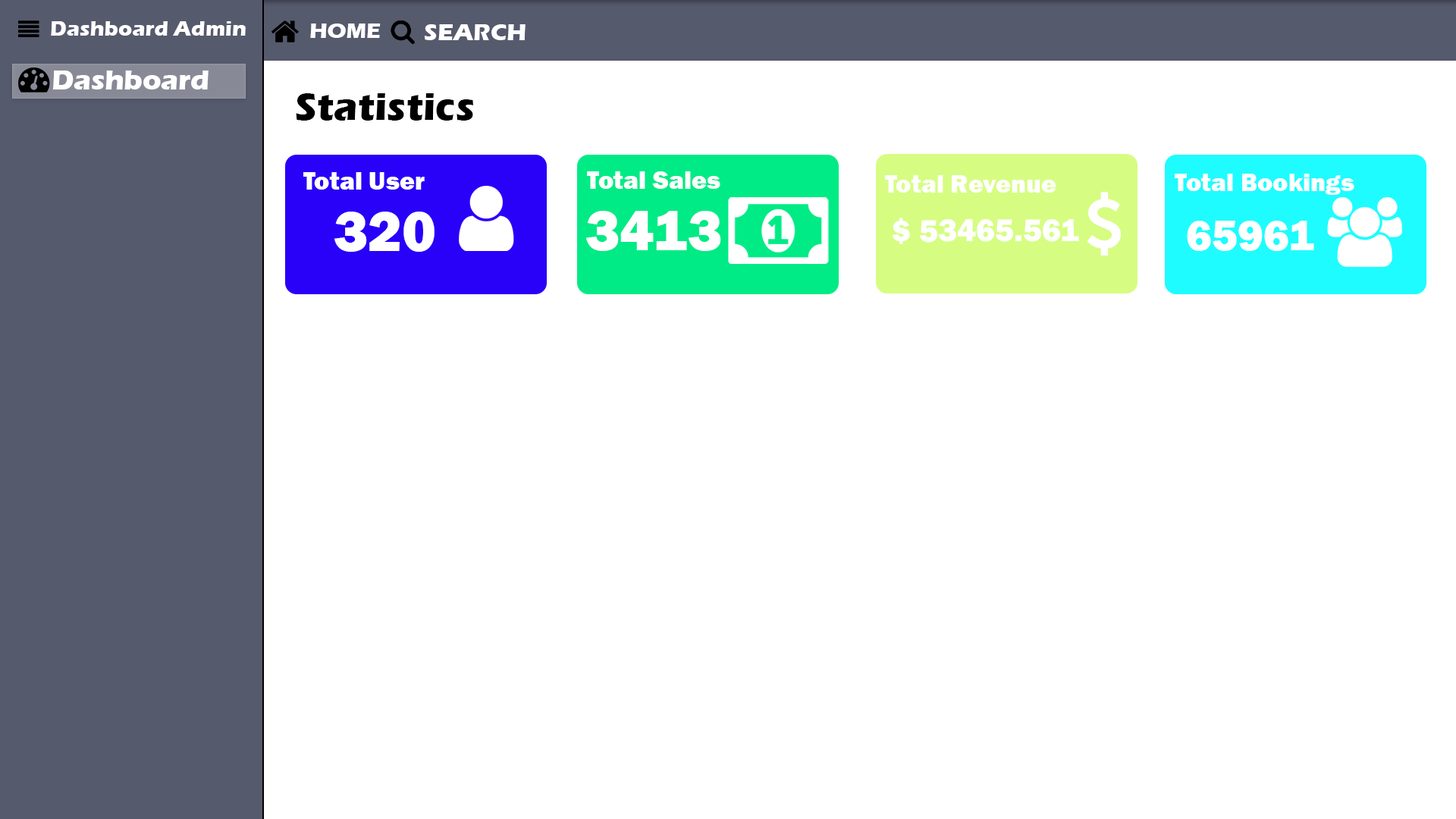
<style>
.page{position:relative;width:1456px;height:819px;background:#ffffff}
.page>*{position:absolute;margin:0}
.t1{font:21.4px "ErasITC-Bold";color:#ffffff}
.t2{font:21.9px "ErasITC-Bold";color:#ffffff}
.t3{font:24.4px "ErasITC-Bold";color:#ffffff}
.t4{font:28.4px "ErasITC-Bold";color:#ffffff}
.t5{font:39.7px "ErasITC-Bold";color:#000000}
.t6{font:26px "FranklinGothic-Heavy";color:#ffffff}
.t7{font:58.2px "FranklinGothic-Heavy";color:#ffffff}
.t8{font:32.5px "FranklinGothic-Heavy";color:#ffffff}
.t9{font:44px "FranklinGothic-Heavy";color:#ffffff}
</style>
<div class="page">
<p class="t1" style="left:51px;top:21px;width:195px;height:15px">Dashboard Admin</p>
<p class="t2" style="left:310px;top:24px;width:71px;height:14px">HOME</p>
<p class="t3" style="left:424px;top:24px;width:102px;height:16px">SEARCH</p>
<p class="t4" style="left:52px;top:71px;width:157px;height:18px">Dashboard</p>
<p class="t5" style="left:296px;top:93px;width:177px;height:28px">Statistics</p>
<p class="t6" style="left:303px;top:172px;width:122px;height:18px">Total User</p>
<p class="t6" style="left:587px;top:171px;width:133px;height:18px">Total Sales</p>
<p class="t6" style="left:1175px;top:174px;width:179px;height:21px">Total Bookings</p>
<p class="t6" style="left:885px;top:175px;width:171px;height:18px">Total Revenue</p>
<p class="t7" style="left:334px;top:212px;width:101px;height:40px">320</p>
<p class="t7" style="left:586px;top:211px;width:135px;height:40px">3413</p>
<p class="t8" style="left:892px;top:218px;width:187px;height:26px">$ 53465.561</p>
<p class="t9" style="left:1187px;top:221px;width:127px;height:30px">65961</p>
</div>
